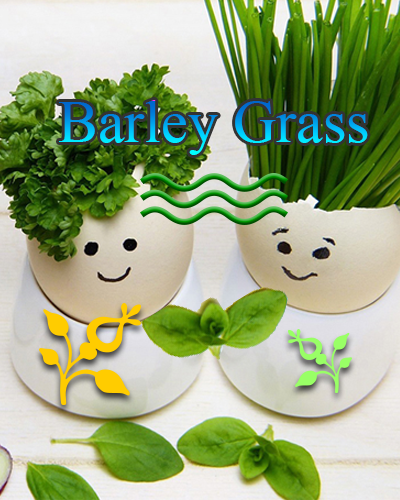
<style>
.page{position:relative;width:400px;height:500px}
.page>*{position:absolute;margin:0}
.t1{font:60px "TimesNewRomanPSMT"}
</style>
<div class="page">
<p class="t1" style="left:59px;top:100px;width:309px;height:55px">Barley Grass</p>
</div>
